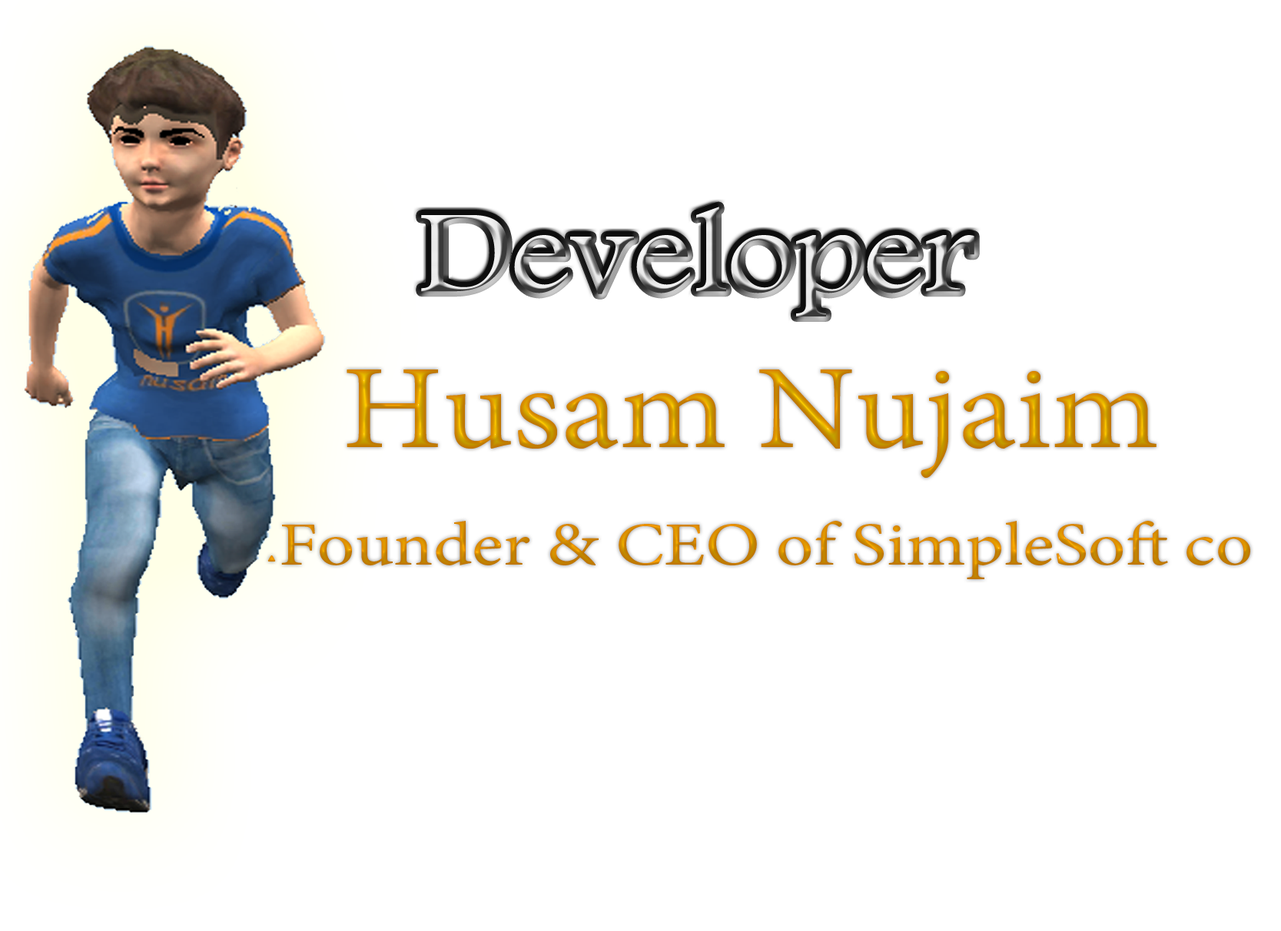
<style>
.page{position:relative;width:1281px;height:931px;background:#ffffff}
.page>*{position:absolute;margin:0}
.t1{font:120px "";color:#d77809;scale:1.1 1}
.t2{font:61.9px "";color:#d77809;scale:1.18 1}
</style>
<div class="page">
<p class="t1" style="left:346px;top:370px;width:810px;height:108px">Husam Nujaim</p>
<p class="t2" style="left:267px;top:521px;width:983px;height:58px">Founder &amp; CEO of SimpleSoft co.</p>
</div>
